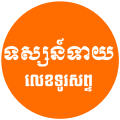
<style>
.page{position:relative;width:120px;height:120px;background:#ff6c00}
.page>*{position:absolute;margin:0}
.t1{font:19px "Kh-Muol";color:#fffefd}
.t2{font:15.4px "Kh-KoulenL";color:#fffefd}
</style>
<div class="page">
<p class="t1" style="left:4px;top:38px;width:110px;height:29px">ទស្សន៍ទាយ</p>
<p class="t2" style="left:24px;top:74px;width:68px;height:18px">លេខទូរសព្ទ</p>
</div>
